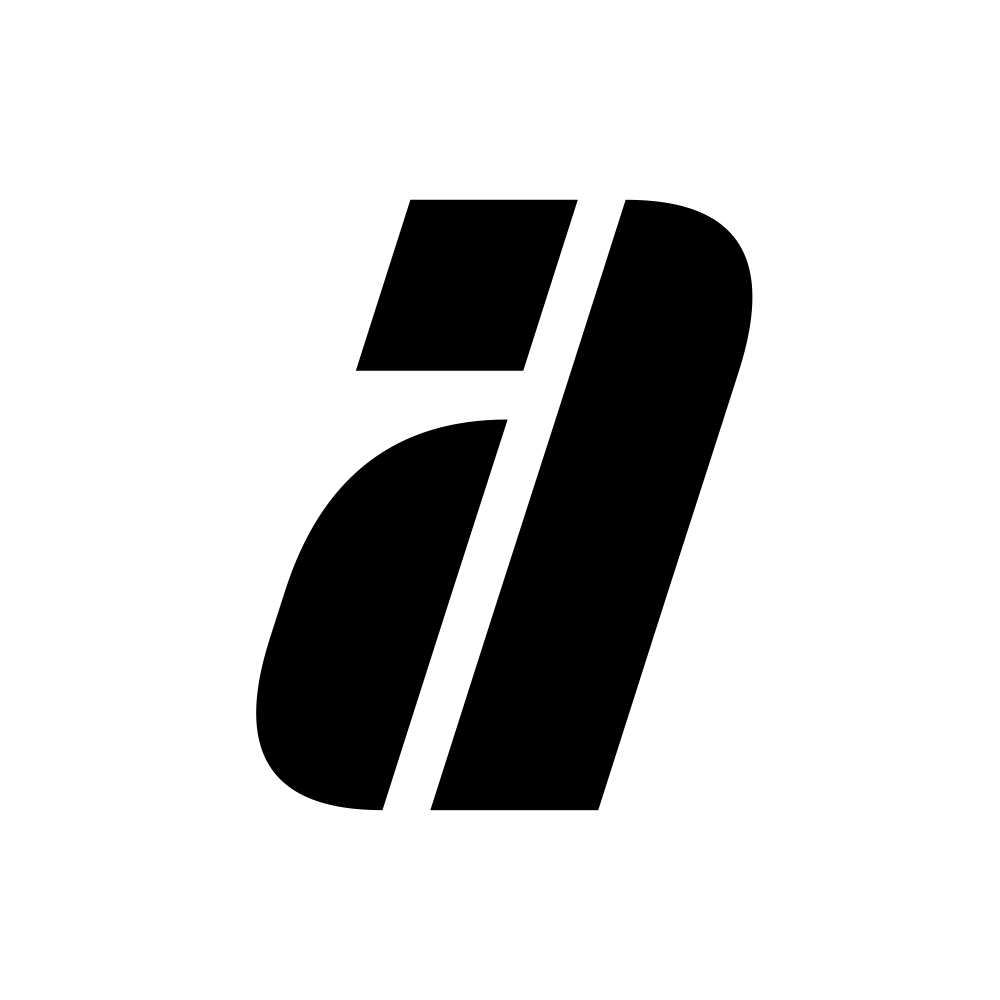
<style>
.page{position:relative;width:1000px;height:1000px;background:#ffffff}
.page>*{position:absolute;margin:0}
.t1{font:1000.2px "Nyamomobile";letter-spacing:0.05em;color:#000000;text-transform:uppercase;font-style:italic}
</style>
<div class="page">
<p class="t1" style="left:256px;top:199px;width:497px;height:612px">A</p>
</div>
